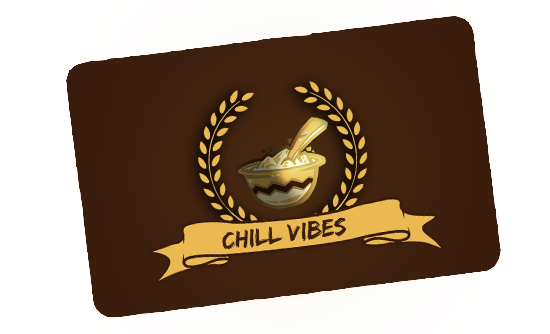
<style>
.page{position:relative;width:550px;height:334px;background:#ffffff}
.page>*{position:absolute;margin:0}
.t1{font:25.4px "EdoSZ";color:#391c0c}
</style>
<div class="page">
<p class="t1" style="left:222px;top:217px;width:125px;height:33px;rotate:-7deg">Chill Vibes</p>
</div>
